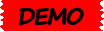
<style>
.page{position:relative;width:104px;height:32px;background:#ff0000}
.page>*{position:absolute;margin:0}
.t1{font:22px "SegoePrint-Bold";letter-spacing:-0.08em;color:#000000}
</style>
<div class="page">
<p class="t1" style="left:19px;top:8px;width:65px;height:17px">DEMO</p>
</div>
